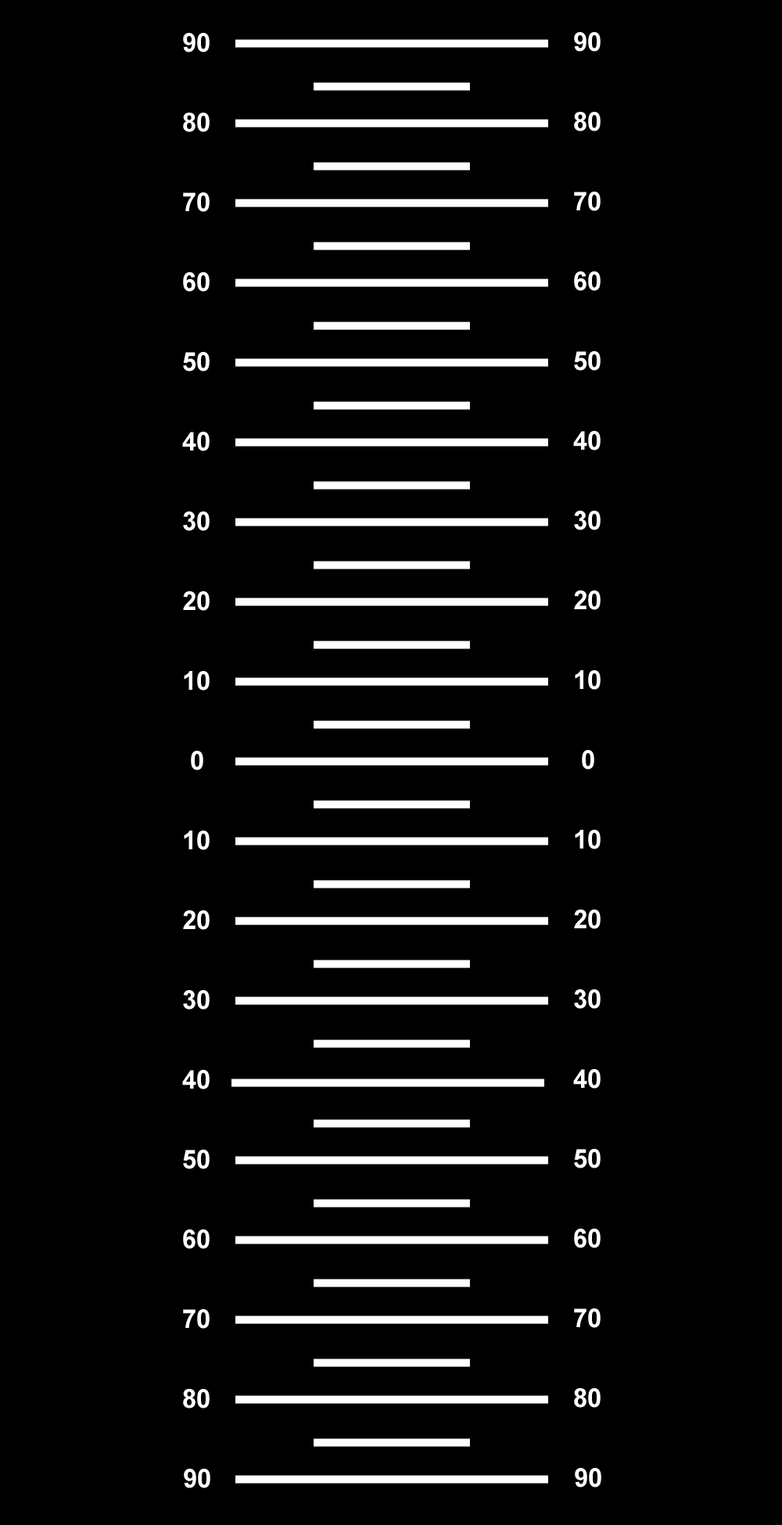
<style>
.page{position:relative;width:782px;height:1525px;background:#000000}
.page>*{position:absolute;margin:0}
.t1{font:26.1px "Arial-BoldMT";color:#ffffff}
</style>
<div class="page">
<p class="t1" style="left:183px;top:33px;width:27px;height:19px">90</p>
<p class="t1" style="left:574px;top:32px;width:27px;height:20px">90</p>
<p class="t1" style="left:183px;top:113px;width:27px;height:19px">80</p>
<p class="t1" style="left:574px;top:112px;width:27px;height:19px">80</p>
<p class="t1" style="left:183px;top:192px;width:27px;height:20px">70</p>
<p class="t1" style="left:574px;top:192px;width:27px;height:19px">70</p>
<p class="t1" style="left:183px;top:272px;width:27px;height:20px">60</p>
<p class="t1" style="left:574px;top:271px;width:27px;height:20px">60</p>
<p class="t1" style="left:183px;top:352px;width:27px;height:19px">50</p>
<p class="t1" style="left:574px;top:351px;width:27px;height:20px">50</p>
<p class="t1" style="left:182px;top:432px;width:28px;height:19px">40</p>
<p class="t1" style="left:573px;top:431px;width:28px;height:19px">40</p>
<p class="t1" style="left:183px;top:511px;width:27px;height:20px">30</p>
<p class="t1" style="left:574px;top:511px;width:27px;height:19px">30</p>
<p class="t1" style="left:183px;top:591px;width:27px;height:20px">20</p>
<p class="t1" style="left:574px;top:590px;width:27px;height:20px">20</p>
<p class="t1" style="left:184px;top:671px;width:26px;height:19px">10</p>
<p class="t1" style="left:575px;top:670px;width:26px;height:20px">10</p>
<p class="t1" style="left:582px;top:750px;width:12px;height:19px">0</p>
<p class="t1" style="left:191px;top:751px;width:12px;height:19px">0</p>
<p class="t1" style="left:184px;top:830px;width:26px;height:20px">10</p>
<p class="t1" style="left:575px;top:830px;width:26px;height:19px">10</p>
<p class="t1" style="left:183px;top:910px;width:27px;height:20px">20</p>
<p class="t1" style="left:574px;top:909px;width:27px;height:20px">20</p>
<p class="t1" style="left:183px;top:990px;width:27px;height:20px">30</p>
<p class="t1" style="left:574px;top:989px;width:27px;height:20px">30</p>
<p class="t1" style="left:182px;top:1070px;width:28px;height:19px">40</p>
<p class="t1" style="left:573px;top:1069px;width:28px;height:20px">40</p>
<p class="t1" style="left:183px;top:1150px;width:27px;height:19px">50</p>
<p class="t1" style="left:574px;top:1149px;width:27px;height:19px">50</p>
<p class="t1" style="left:183px;top:1229px;width:27px;height:20px">60</p>
<p class="t1" style="left:574px;top:1229px;width:27px;height:19px">60</p>
<p class="t1" style="left:183px;top:1309px;width:27px;height:20px">70</p>
<p class="t1" style="left:574px;top:1308px;width:27px;height:20px">70</p>
<p class="t1" style="left:183px;top:1389px;width:27px;height:19px">80</p>
<p class="t1" style="left:574px;top:1388px;width:27px;height:20px">80</p>
<p class="t1" style="left:184px;top:1469px;width:26px;height:19px">90</p>
<p class="t1" style="left:575px;top:1468px;width:26px;height:19px">90</p>
</div>
